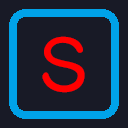
<style>
.page{position:relative;width:128px;height:128px;background:#181a26}
.page>*{position:absolute;margin:0}
.t1{font:80px "©M¥­²Ê¶ê";color:#ff0000}
</style>
<div class="page">
<p class="t1" style="left:42px;top:36px;width:43px;height:57px">S</p>
</div>
